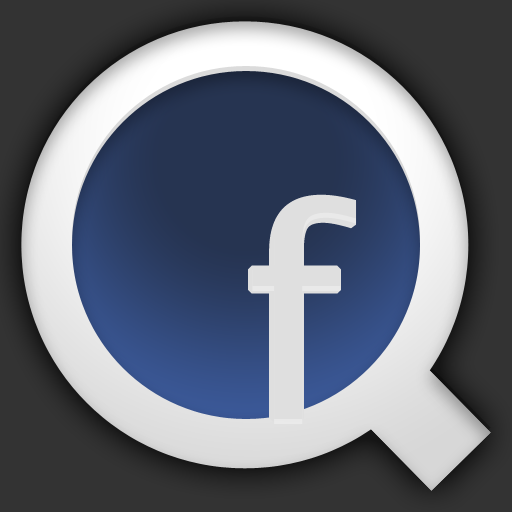
<style>
.page{position:relative;width:512px;height:512px}
.page>*{position:absolute;margin:0}
.t1{font:280px "LucidaGrande";color:#dfdfdf;font-weight:bold}
</style>
<div class="page">
<p class="t1" style="left:248px;top:194px;width:108px;height:228px">f</p>
</div>
